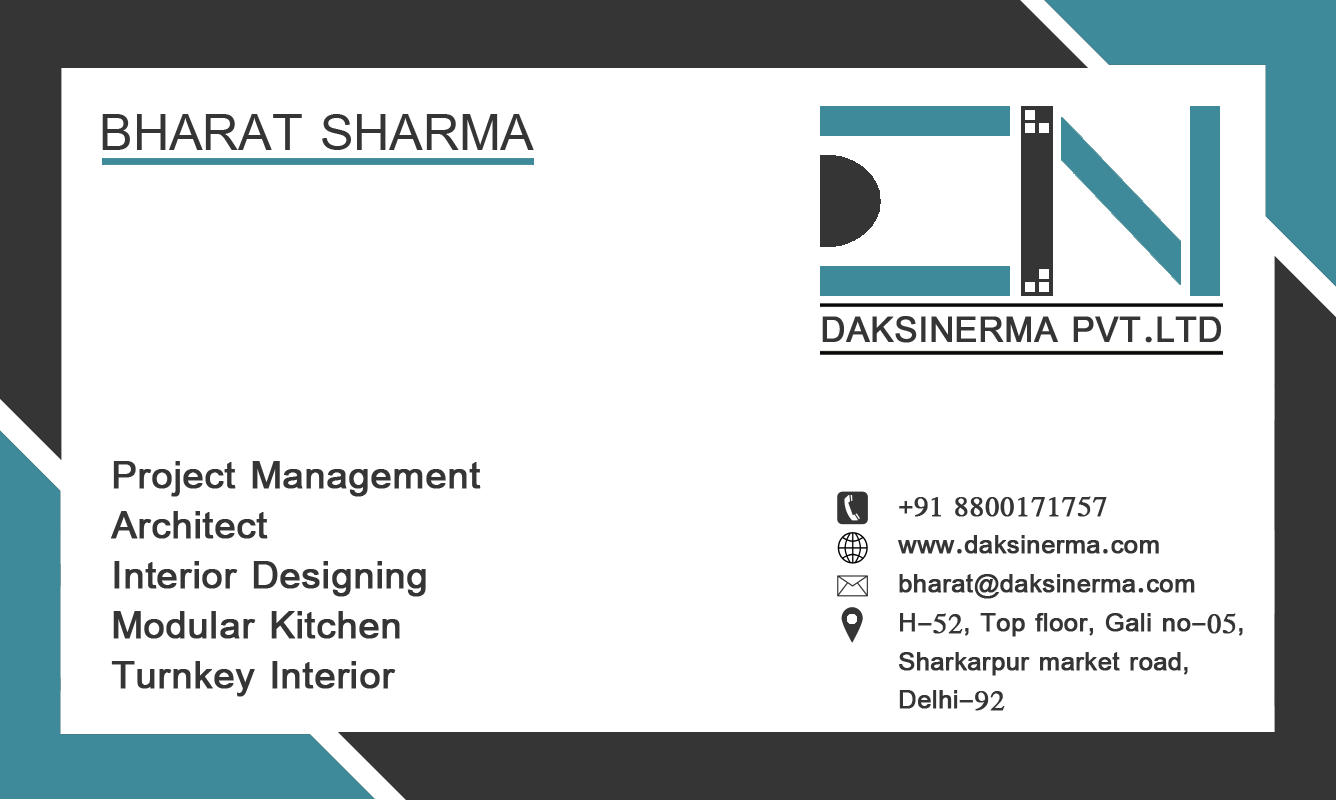
<style>
.page{position:relative;width:1336px;height:800px;background:#ffffff}
.page>*{position:absolute;margin:0}
.t1{font:55.6px "SimplifiedArabic";color:#353535}
.t2{font:38.9px "SimplifiedArabic";color:#353535;font-weight:bold}
.t3{font:41.7px "SimplifiedArabic";color:#353535;font-weight:bold}
.t4{font:27.8px/38.9px "SimplifiedArabic";color:#353535;font-weight:bold}
</style>
<div class="page">
<p class="t1" style="left:102px;top:114px;width:432px;height:36px">BHARAT SHARMA</p>
<p class="t2" style="left:822px;top:316px;width:399px;height:27px">DAKSINERMA PVT.LTD</p>
<p class="t3" style="left:111px;top:461px;width:370px;height:236px">Project Management<br>Architect<br>Interior Designing<br>Modular Kitchen <br>Turnkey Interior</p>
<p class="t4" style="left:898px;top:496px;width:345px;height:215px">+91 8800171757<br>www.daksinerma.com<br>bharat@daksinerma.com<br>H-52, Top floor, Gali no-05,<br>Sharkarpur market road,<br>Delhi-92</p>
</div>
